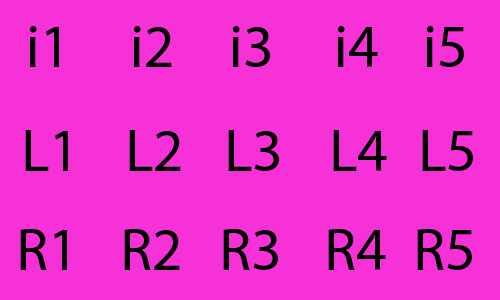
<style>
.page{position:relative;width:500px;height:300px;background:#f531d7}
.page>*{position:absolute;margin:0}
.t1{font:60px "MyriadHebrew-Regular";letter-spacing:-0.01em;color:#000000}
</style>
<div class="page">
<p class="t1" style="left:30px;top:26px;width:29px;height:41px">i1</p>
<p class="t1" style="left:134px;top:26px;width:38px;height:41px">i2</p>
<p class="t1" style="left:233px;top:26px;width:37px;height:41px">i3</p>
<p class="t1" style="left:338px;top:26px;width:40px;height:41px">i4</p>
<p class="t1" style="left:427px;top:26px;width:37px;height:41px">i5</p>
<p class="t1" style="left:25px;top:130px;width:43px;height:41px">L1</p>
<p class="t1" style="left:129px;top:130px;width:52px;height:41px">L2</p>
<p class="t1" style="left:228px;top:130px;width:51px;height:41px">L3</p>
<p class="t1" style="left:333px;top:130px;width:54px;height:41px">L4</p>
<p class="t1" style="left:422px;top:130px;width:51px;height:41px">L5</p>
<p class="t1" style="left:20px;top:229px;width:47px;height:41px">R1</p>
<p class="t1" style="left:124px;top:229px;width:56px;height:41px">R2</p>
<p class="t1" style="left:223px;top:229px;width:55px;height:41px">R3</p>
<p class="t1" style="left:328px;top:229px;width:58px;height:41px">R4</p>
<p class="t1" style="left:417px;top:229px;width:55px;height:41px">R5</p>
</div>
